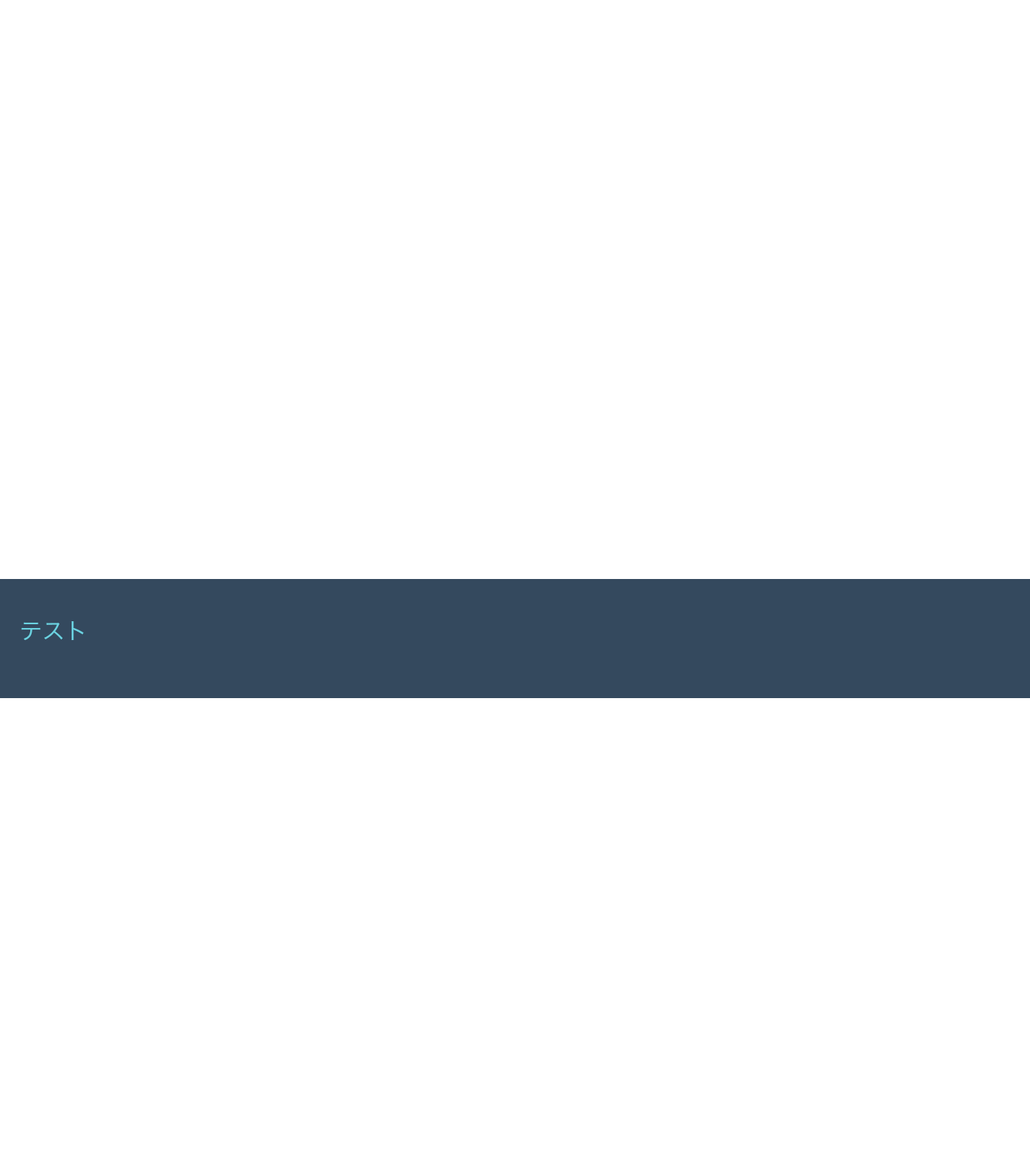
<style>
.page{position:relative;width:1030px;height:1158px;background:#ffffff}
.page>*{position:absolute;margin:0}
.t1{font:22.6px "HiraKakuPro-W3";color:#6bd2e1}
</style>
<div class="page">
<p class="t1" style="left:21px;top:621px;width:63px;height:19px">テスト</p>
</div>
